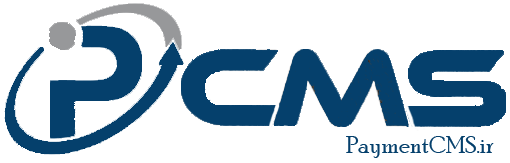
<style>
.page{position:relative;width:510px;height:163px;background:#ffffff}
.page>*{position:absolute;margin:0}
.t1{font:25px "PoorRichard-Regular";color:#05406c}
</style>
<div class="page">
<p class="t1" style="left:346px;top:136px;width:148px;height:22px">PaymentCMS.ir</p>
</div>
